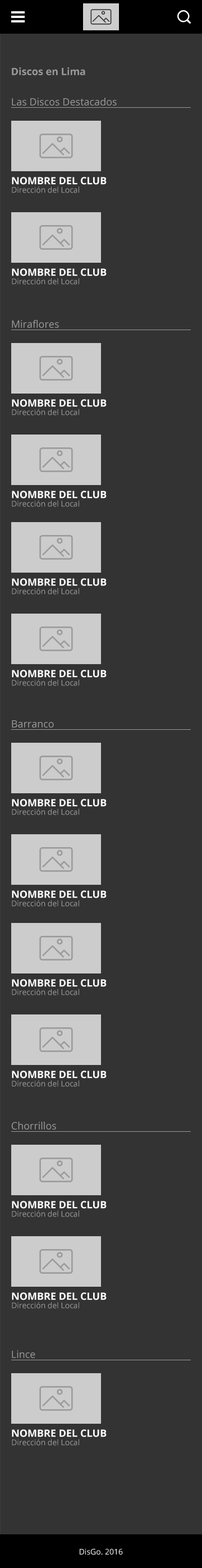
<style>
.page{position:relative;width:202px;height:1568px;background:#333333}
.page>*{position:absolute;margin:0}
.t1{font:10.1px "OpenSans-Bold";color:#9a9a9a}
.t2{font:10.1px "OpenSans";color:#9a9a9a}
.t3{font:10.1px "OpenSans-Bold";color:#ffffff;text-transform:uppercase}
.t4{font:7.9px "OpenSans";color:#9a9a9a}
.t5{font:7.9px "OpenSans";color:#ffffff}
</style>
<div class="page">
<p class="t1" style="left:12px;top:67px;width:73px;height:8px">Discos en Lima</p>
<p class="t2" style="left:12px;top:98px;width:105px;height:8px">Las Discos Destacados</p>
<p class="t3" style="left:12px;top:177px;width:95px;height:8px">Nombre del club</p>
<p class="t4" style="left:12px;top:186px;width:67px;height:7px">Dirección del Local</p>
<p class="t3" style="left:12px;top:268px;width:95px;height:8px">Nombre del club</p>
<p class="t4" style="left:12px;top:278px;width:67px;height:7px">Dirección del Local</p>
<p class="t2" style="left:12px;top:320px;width:47px;height:8px">Miraflores</p>
<p class="t3" style="left:12px;top:399px;width:95px;height:8px">Nombre del club</p>
<p class="t4" style="left:12px;top:409px;width:67px;height:6px">Dirección del Local</p>
<p class="t3" style="left:12px;top:491px;width:95px;height:8px">Nombre del club</p>
<p class="t4" style="left:12px;top:500px;width:67px;height:7px">Dirección del Local</p>
<p class="t3" style="left:12px;top:578px;width:95px;height:8px">Nombre del club</p>
<p class="t4" style="left:12px;top:588px;width:67px;height:7px">Dirección del Local</p>
<p class="t3" style="left:12px;top:670px;width:95px;height:8px">Nombre del club</p>
<p class="t4" style="left:12px;top:679px;width:67px;height:7px">Dirección del Local</p>
<p class="t2" style="left:12px;top:720px;width:42px;height:8px">Barranco</p>
<p class="t4" style="left:12px;top:808px;width:67px;height:7px">Dirección del Local</p>
<p class="t3" style="left:12px;top:799px;width:95px;height:8px">Nombre del club</p>
<p class="t3" style="left:12px;top:890px;width:95px;height:8px">Nombre del club</p>
<p class="t4" style="left:12px;top:900px;width:67px;height:7px">Dirección del Local</p>
<p class="t4" style="left:12px;top:989px;width:67px;height:6px">Dirección del Local</p>
<p class="t3" style="left:12px;top:979px;width:95px;height:8px">Nombre del club</p>
<p class="t3" style="left:12px;top:1071px;width:95px;height:7px">Nombre del club</p>
<p class="t4" style="left:12px;top:1080px;width:67px;height:7px">Dirección del Local</p>
<p class="t2" style="left:11px;top:1122px;width:45px;height:8px">Chorrillos</p>
<p class="t3" style="left:12px;top:1201px;width:95px;height:8px">Nombre del club</p>
<p class="t4" style="left:12px;top:1210px;width:67px;height:7px">Dirección del Local</p>
<p class="t4" style="left:12px;top:1302px;width:67px;height:7px">Dirección del Local</p>
<p class="t3" style="left:12px;top:1292px;width:95px;height:8px">Nombre del club</p>
<p class="t2" style="left:12px;top:1350px;width:23px;height:8px">Lince</p>
<p class="t3" style="left:12px;top:1429px;width:95px;height:8px">Nombre del club</p>
<p class="t4" style="left:12px;top:1439px;width:67px;height:7px">Dirección del Local</p>
<p class="t5" style="left:80px;top:1548px;width:43px;height:7px">DisGo. 2016</p>
</div>
